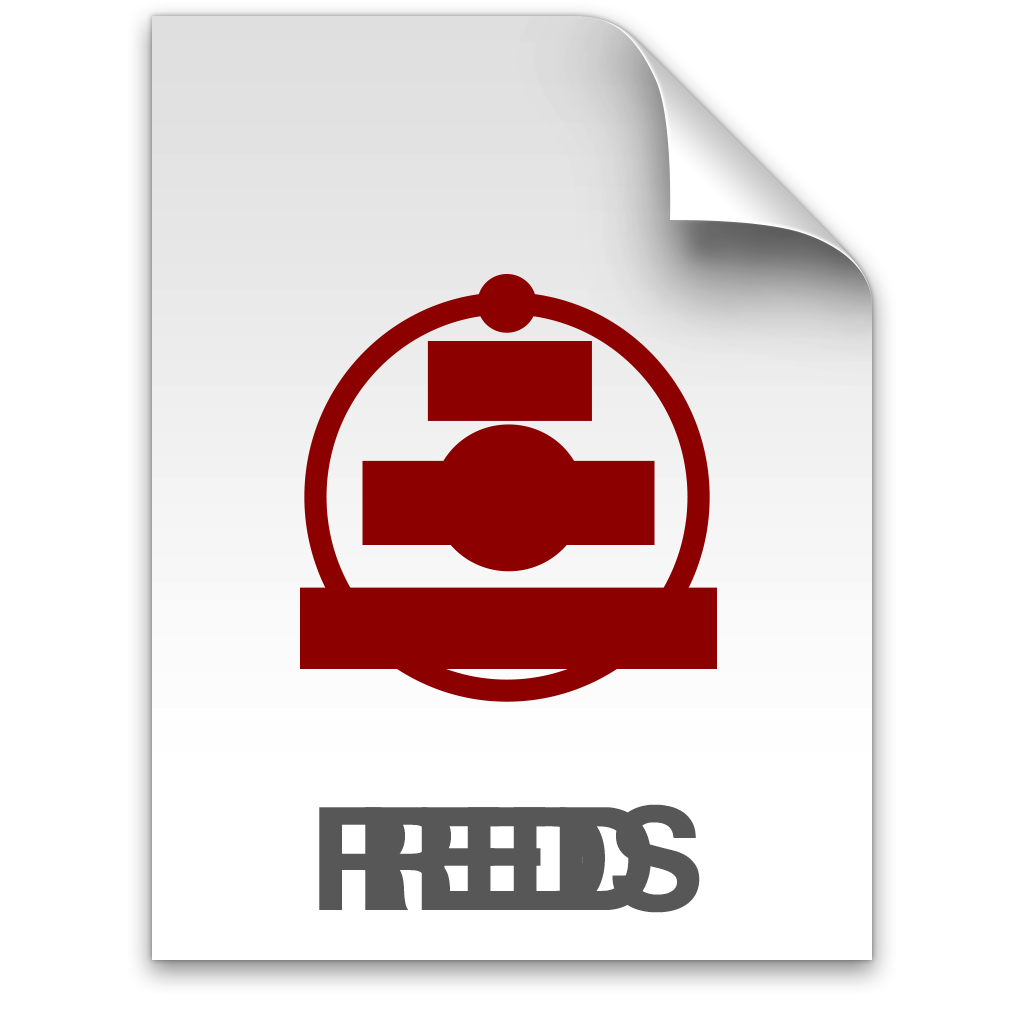
<style>
.page{position:relative;width:1024px;height:1024px;background:#ffffff}
.page>*{position:absolute;margin:0}
.t1{font:144px "HelveticaNeue-Bold";letter-spacing:-0.01em;color:#575757}
</style>
<div class="page">
<p class="t1" style="left:319px;top:804px;width:381px;height:109px">REDS</p>
<p class="t1" style="left:365px;top:807px;width:286px;height:103px">RED</p>
</div>
